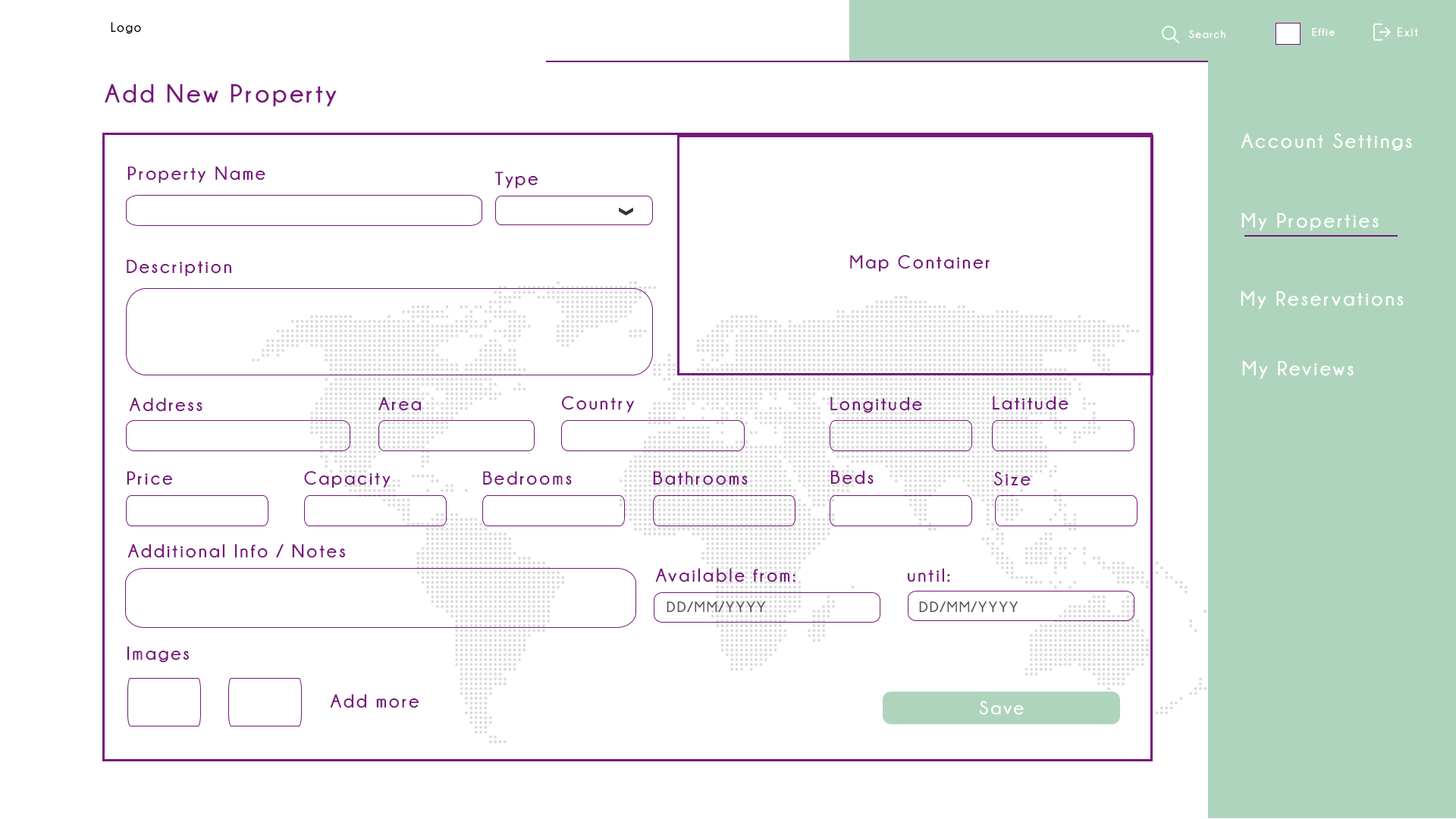
<style>
.page{position:relative;width:1456px;height:819px;background:#ffffff}
.page>*{position:absolute;margin:0}
.t1{font:13.6px "Champagne&Limousines-Bold";letter-spacing:0.1em;color:#000000;scale:0.94 1}
.t2{font:10.9px "Champagne&Limousines-Bold";letter-spacing:0.1em;color:#ffffff}
.t3{font:12.6px "Champagne&Limousines-Bold";letter-spacing:0.1em;color:#ffffff}
.t4{font:25.8px "Champagne&Limousines-Bold";letter-spacing:0.1em;color:#76167c}
.t5{font:20.5px "Champagne&Limousines-Bold";letter-spacing:0.1em;color:#ffffff}
.t6{font:19px "Champagne&Limousines-Bold";letter-spacing:0.1em;color:#76167c}
.t7{font:14.8px "Champagne&Limousines-Bold";letter-spacing:0.1em;color:#535353}
.t8{font:19px "Champagne&Limousines-Bold";letter-spacing:0.1em;color:#fffeff}
</style>
<div class="page">
<p class="t1" style="left:111px;top:22px;width:30px;height:12px">Logo</p>
<p class="t2" style="left:1188px;top:30px;width:37px;height:9px">Search</p>
<p class="t2" style="left:1312px;top:27px;width:23px;height:9px">Effie</p>
<p class="t3" style="left:1397px;top:27px;width:21px;height:10px">Exit</p>
<p class="t4" style="left:105px;top:84px;width:232px;height:23px">Add New Property</p>
<p class="t5" style="left:1241px;top:133px;width:171px;height:18px">Account Settings</p>
<p class="t6" style="left:127px;top:166px;width:138px;height:17px">Property Name</p>
<p class="t6" style="left:495px;top:171px;width:43px;height:17px">Type</p>
<p class="t5" style="left:1241px;top:213px;width:138px;height:18px">My Properties</p>
<p class="t6" style="left:850px;top:255px;width:140px;height:16px">Map Container</p>
<p class="t6" style="left:127px;top:259px;width:104px;height:17px">Description</p>
<p class="t5" style="left:1241px;top:291px;width:162px;height:18px">My Reservations</p>
<p class="t5" style="left:1242px;top:361px;width:112px;height:18px">My Reviews</p>
<p class="t6" style="left:129px;top:397px;width:73px;height:15px">Address</p>
<p class="t6" style="left:378px;top:397px;width:43px;height:14px">Area</p>
<p class="t6" style="left:562px;top:396px;width:73px;height:17px">Country</p>
<p class="t6" style="left:830px;top:397px;width:92px;height:16px">Longitude</p>
<p class="t6" style="left:993px;top:396px;width:75px;height:14px">Latitude</p>
<p class="t6" style="left:127px;top:471px;width:45px;height:14px">Price</p>
<p class="t6" style="left:304px;top:471px;width:87px;height:17px">Capacity</p>
<p class="t6" style="left:483px;top:471px;width:89px;height:14px">Bedrooms</p>
<p class="t6" style="left:653px;top:471px;width:95px;height:14px">Bathrooms</p>
<p class="t6" style="left:830px;top:470px;width:44px;height:15px">Beds</p>
<p class="t6" style="left:993px;top:472px;width:38px;height:14px">Size</p>
<p class="t6" style="left:127px;top:544px;width:218px;height:14px">Additional Info / Notes</p>
<p class="t6" style="left:655px;top:568px;width:140px;height:14px">Available from:</p>
<p class="t6" style="left:908px;top:568px;width:42px;height:14px">until:</p>
<p class="t7" style="left:667px;top:601px;width:99px;height:12px">DD/MM/YYYY</p>
<p class="t7" style="left:919px;top:601px;width:99px;height:12px">DD/MM/YYYY</p>
<p class="t6" style="left:127px;top:646px;width:62px;height:17px">Images</p>
<p class="t6" style="left:330px;top:694px;width:89px;height:14px">Add more</p>
<p class="t8" style="left:979px;top:701px;width:45px;height:14px">Save</p>
</div>
